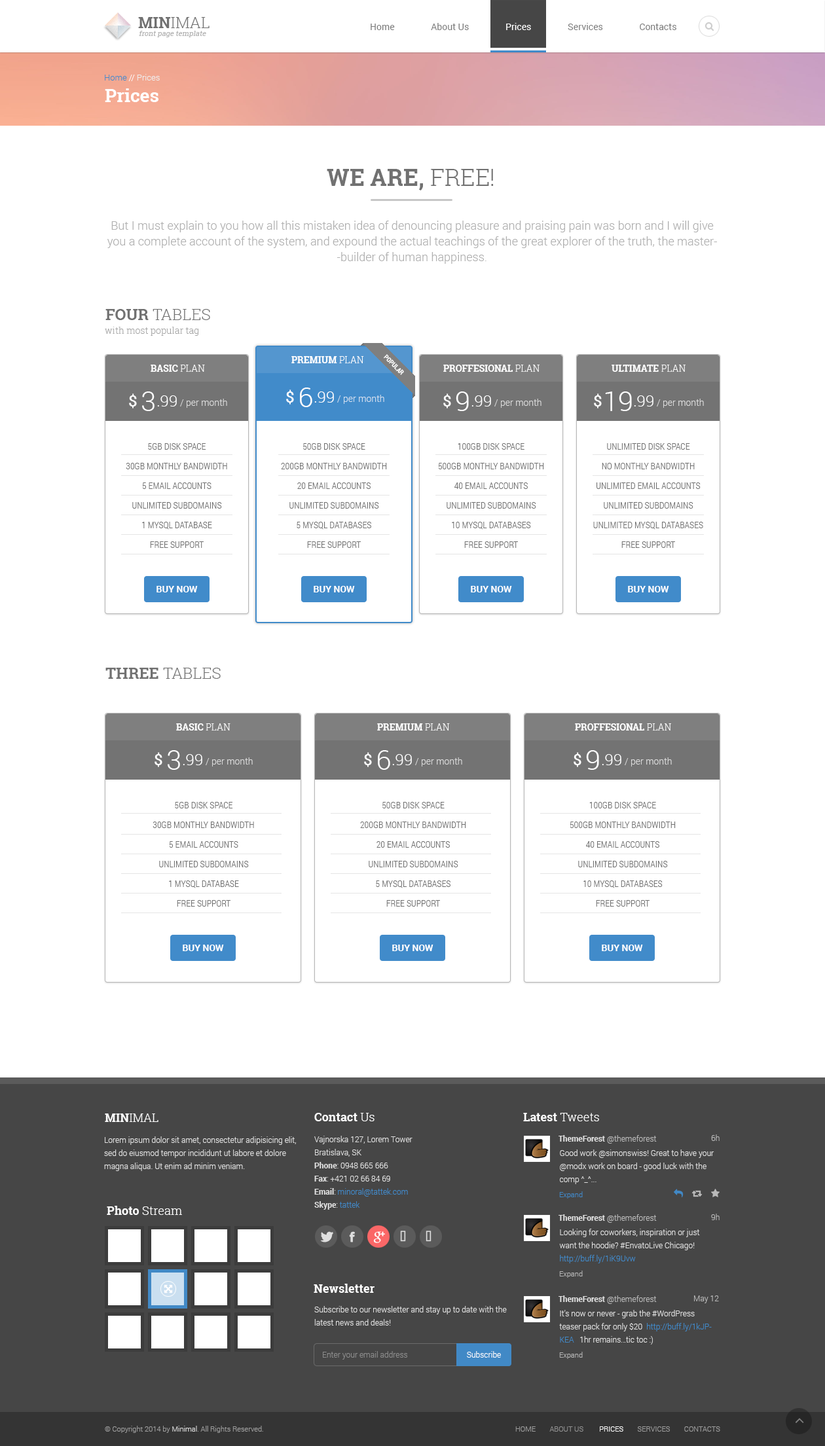
<style>
.page{position:relative;width:825px;height:1446px;background:#ffffff}
.page>*{position:absolute;margin:0}
.t1{font:15.7px "RobotoSlab-Light";color:#717171;text-transform:uppercase}
.t2{font:15.7px "RobotoSlab-Bold";color:#717171;text-transform:uppercase}
.t3{font:7.2px "RobotoSlab-Regular";color:#b1b1b1;font-style:italic}
.t4{font:8.5px "Roboto-Light";color:#eeeeee}
.t5{font:8.5px "Roboto-Light";color:#418bca}
.t6{font:8.5px "Roboto-Light";color:#ffffff}
.t7{font:18.3px "RobotoSlab-Bold";color:#ffffff}
.t8{font:23.6px "RobotoSlab-Bold";color:#717171}
.t9{font:23.6px "RobotoSlab-Light";color:#717171}
.t10{font:11.8px/15.7px "Roboto-Light";color:#b0b0b0}
.t11{font:15.7px "RobotoSlab-Light";color:#717171}
.t12{font:15.7px "RobotoSlab-Bold";color:#717171}
.t13{font:9.2px "RobotoSlab-Light";color:#a3a3a3}
.t14{font:9.2px "RobotoSlab-Bold";color:#ffffff}
.t15{font:9.2px "RobotoSlab-Light";color:#ffffff}
.t16{font:6.5px "RobotoCondensed-Bold";color:#ffffff}
.t17{font:15.7px "Roboto-Medium";color:#ffffff}
.t18{font:27.5px "Roboto-Light";color:#ffffff}
.t19{font:15.7px "Roboto-Light";color:#ffffff}
.t20{font:9.2px "Roboto-Light";color:#dbdbdb}
.t21{font:9.2px "Roboto-Light";color:#d2e0f0}
.t22{font:9.2px/19.6px "RobotoCondensed-Light";color:#717171}
.t23{font:9.2px "Roboto-Bold";color:#ffffff}
.t24{font:11.8px "RobotoSlab-Light";color:#ffffff}
.t25{font:11.8px "RobotoSlab-Bold";color:#ffffff}
.t26{font:7.9px/13.1px "Roboto-Light";color:#dfdfdf}
.t27{font:7.9px/13.1px "Roboto-Bold";color:#dfdfdf}
.t28{font:7.9px/13.1px "Roboto-Light";color:#4189c6}
.t29{font:7.9px "Roboto-Light";color:#b9b9b9}
.t30{font:7.9px "Roboto-Bold";color:#dfdfdf}
.t31{font:7.2px "Roboto-Light";color:#4189c6}
.t32{font:7.2px "Roboto-Light";color:#b6b6b6}
.t33{font:7.9px "Roboto-Light";color:#8c8c8c}
.t34{font:7.9px "Roboto-Light";color:#ffffff}
.t35{font:7.2px "Roboto-Light";color:#9d9d9d}
.t36{font:7.2px "Roboto-Light";color:#d9d9d9}
.t37{font:7.2px "Roboto-Light";color:#929292}
.t38{font:7.2px "Roboto-Light";color:#ffffff}
</style>
<div class="page">
<p class="t1" style="left:138px;top:17px;width:71px;height:11px"><span class="t2">MIN</span>IMAL</p>
<p class="t3" style="left:139px;top:31px;width:67px;height:6px">front page template</p>
<p class="t4" style="left:105px;top:74px;width:55px;height:7px"><span class="t5">Home </span><span class="t6">// </span>Prices</p>
<p class="t7" style="left:105px;top:88px;width:53px;height:14px">Prices</p>
<p class="t8" style="left:327px;top:169px;width:167px;height:21px">WE ARE, <span class="t9">FREE!</span></p>
<p class="t10" style="left:107px;top:221px;width:610px;height:43px;text-align:center">But I must explain to you how all this mistaken idea of denouncing pleasure and praising pain was born and I will give you a complete account of the system, and expound the actual teachings of the great explorer of the truth, the master-builder of human happiness.</p>
<p class="t11" style="left:105px;top:309px;width:105px;height:11px"><span class="t12">FOUR </span>TABLES</p>
<p class="t13" style="left:105px;top:327px;width:93px;height:9px">with most popular tag</p>
<p class="t14" style="left:151px;top:365px;width:54px;height:7px">BASIC<span class="t15"> PLAN</span></p>
<p class="t14" style="left:291px;top:356px;width:73px;height:7px">PREMIUM <span class="t15">PLAN</span></p>
<p class="t16" style="left:384px;top:354px;width:20px;height:21px;rotate:45deg">POPULAR</p>
<p class="t14" style="left:443px;top:365px;width:96px;height:7px">PROFFESIONAL <span class="t15">PLAN</span></p>
<p class="t14" style="left:611px;top:365px;width:74px;height:7px">ULTIMATE <span class="t15">PLAN</span></p>
<p class="t17" style="left:286px;top:389px;width:8px;height:16px">$</p>
<p class="t18" style="left:300px;top:387px;width:12px;height:20px">6</p>
<p class="t17" style="left:129px;top:393px;width:8px;height:15px">$</p>
<p class="t18" style="left:142px;top:391px;width:12px;height:20px">3</p>
<p class="t19" style="left:157px;top:395px;width:20px;height:11px">.99</p>
<p class="t20" style="left:180px;top:399px;width:47px;height:9px">/ per month</p>
<p class="t19" style="left:314px;top:391px;width:20px;height:12px">.99</p>
<p class="t21" style="left:337px;top:395px;width:47px;height:9px">/ per month</p>
<p class="t17" style="left:443px;top:393px;width:8px;height:15px">$</p>
<p class="t18" style="left:456px;top:391px;width:13px;height:20px">9</p>
<p class="t19" style="left:471px;top:395px;width:20px;height:11px">.99</p>
<p class="t20" style="left:494px;top:399px;width:47px;height:9px">/ per month</p>
<p class="t17" style="left:594px;top:393px;width:8px;height:15px">$</p>
<p class="t18" style="left:605px;top:391px;width:27px;height:20px">19</p>
<p class="t19" style="left:634px;top:395px;width:19px;height:11px">.99</p>
<p class="t20" style="left:656px;top:399px;width:48px;height:9px">/ per month</p>
<p class="t22" style="left:126px;top:443px;width:101px;height:105px;text-align:center">5GB DISK SPACE<br>30GB MONTHLY BANDWIDTH<br>5 EMAIL ACCOUNTS<br>UNLIMITED SUBDOMAINS<br>1 MYSQL DATABASE<br>FREE SUPPORT</p>
<p class="t22" style="left:281px;top:443px;width:106px;height:105px;text-align:center">50GB DISK SPACE<br>200GB MONTHLY BANDWIDTH<br>20 EMAIL ACCOUNTS<br>UNLIMITED SUBDOMAINS<br>5 MYSQL DATABASES<br>FREE SUPPORT</p>
<p class="t22" style="left:438px;top:443px;width:106px;height:105px;text-align:center">100GB DISK SPACE<br>500GB MONTHLY BANDWIDTH<br>40 EMAIL ACCOUNTS<br>UNLIMITED SUBDOMAINS<br>10 MYSQL DATABASES<br>FREE SUPPORT</p>
<p class="t22" style="left:593px;top:443px;width:110px;height:105px;text-align:center">UNLIMITED DISK SPACE<br>NO MONTHLY BANDWIDTH<br>UNLIMITED EMAIL ACCOUNTS<br>UNLIMITED SUBDOMAINS<br>UNLIMITED MYSQL DATABASES<br>FREE SUPPORT</p>
<p class="t23" style="left:156px;top:586px;width:42px;height:6px">BUY NOW</p>
<p class="t23" style="left:314px;top:586px;width:41px;height:6px">BUY NOW</p>
<p class="t23" style="left:471px;top:586px;width:41px;height:6px">BUY NOW</p>
<p class="t23" style="left:628px;top:586px;width:41px;height:6px">BUY NOW</p>
<p class="t11" style="left:105px;top:668px;width:116px;height:11px"><span class="t12">THREE </span>TABLES</p>
<p class="t14" style="left:176px;top:723px;width:54px;height:7px">BASIC<span class="t15"> PLAN</span></p>
<p class="t14" style="left:377px;top:723px;width:73px;height:7px">PREMIUM <span class="t15">PLAN</span></p>
<p class="t14" style="left:575px;top:723px;width:96px;height:7px">PROFFESIONAL <span class="t15">PLAN</span></p>
<p class="t17" style="left:154px;top:752px;width:8px;height:15px">$</p>
<p class="t18" style="left:168px;top:750px;width:12px;height:20px">3</p>
<p class="t19" style="left:183px;top:754px;width:19px;height:11px">.99</p>
<p class="t20" style="left:206px;top:757px;width:47px;height:9px">/ per month</p>
<p class="t17" style="left:364px;top:752px;width:8px;height:15px">$</p>
<p class="t18" style="left:378px;top:750px;width:12px;height:20px">6</p>
<p class="t19" style="left:392px;top:754px;width:20px;height:11px">.99</p>
<p class="t20" style="left:415px;top:757px;width:47px;height:9px">/ per month</p>
<p class="t17" style="left:573px;top:752px;width:8px;height:15px">$</p>
<p class="t18" style="left:586px;top:750px;width:13px;height:20px">9</p>
<p class="t19" style="left:602px;top:754px;width:19px;height:11px">.99</p>
<p class="t20" style="left:624px;top:757px;width:48px;height:9px">/ per month</p>
<p class="t22" style="left:153px;top:802px;width:101px;height:105px;text-align:center">5GB DISK SPACE<br>30GB MONTHLY BANDWIDTH<br>5 EMAIL ACCOUNTS<br>UNLIMITED SUBDOMAINS<br>1 MYSQL DATABASE<br>FREE SUPPORT</p>
<p class="t22" style="left:360px;top:802px;width:106px;height:105px;text-align:center">50GB DISK SPACE<br>200GB MONTHLY BANDWIDTH<br>20 EMAIL ACCOUNTS<br>UNLIMITED SUBDOMAINS<br>5 MYSQL DATABASES<br>FREE SUPPORT</p>
<p class="t22" style="left:569px;top:802px;width:106px;height:105px;text-align:center">100GB DISK SPACE<br>500GB MONTHLY BANDWIDTH<br>40 EMAIL ACCOUNTS<br>UNLIMITED SUBDOMAINS<br>10 MYSQL DATABASES<br>FREE SUPPORT</p>
<p class="t23" style="left:183px;top:944px;width:41px;height:7px">BUY NOW</p>
<p class="t23" style="left:392px;top:944px;width:41px;height:7px">BUY NOW</p>
<p class="t23" style="left:602px;top:944px;width:41px;height:7px">BUY NOW</p>
<p class="t24" style="left:105px;top:1113px;width:53px;height:9px"><span class="t25">MIN</span>IMAL</p>
<p class="t25" style="left:314px;top:1113px;width:60px;height:8px">Contact <span class="t24">Us</span></p>
<p class="t25" style="left:523px;top:1113px;width:76px;height:8px">Latest <span class="t24">Tweets</span></p>
<p class="t26" style="left:104px;top:1136px;width:192px;height:35px">Lorem ipsum dolor sit amet, consectetur adipisicing elit, sed do eiusmod tempor incididunt ut labore et dolore magna aliqua. Ut enim ad minim veniam.</p>
<p class="t26" style="left:314px;top:1136px;width:98px;height:74px">Vajnorska 127, Lorem Tower<br>Bratislava, SK<br><span class="t27">Phone</span>: 0948 665 666<br><span class="t27">Fax</span>: +421 02 66 84 69<br><span class="t27">Email</span>: <span class="t28">minoral@tattek.com<br></span><span class="t27">Skype</span>: <span class="t28">tattek</span></p>
<p class="t29" style="left:558px;top:1135px;width:98px;height:8px"><span class="t30">ThemeForest </span>@themeforest</p>
<p class="t29" style="left:711px;top:1134px;width:8px;height:7px">6h</p>
<p class="t26" style="left:559px;top:1149px;width:155px;height:35px">Good work @simonswiss! Great to have your @modx work on board - good luck with the comp ^_^...<br>^Dan</p>
<p class="t31" style="left:559px;top:1191px;width:24px;height:7px">Expand</p>
<p class="t24" style="left:107px;top:1206px;width:75px;height:9px"><span class="t25">Photo </span>Stream</p>
<p class="t29" style="left:558px;top:1214px;width:98px;height:9px"><span class="t30">ThemeForest </span>@themeforest</p>
<p class="t29" style="left:711px;top:1214px;width:8px;height:6px">9h</p>
<p class="t26" style="left:559px;top:1229px;width:141px;height:34px">Looking for coworkers, inspiration or just want the hoodie? #EnvatoLive Chicago! <span class="t28">http://buff.ly/1iK9Uvw<br></span>^Dan</p>
<p class="t32" style="left:559px;top:1270px;width:24px;height:8px">Expand</p>
<p class="t25" style="left:314px;top:1284px;width:60px;height:9px">Newsletter</p>
<p class="t29" style="left:558px;top:1295px;width:98px;height:9px"><span class="t30">ThemeForest </span>@themeforest</p>
<p class="t29" style="left:694px;top:1295px;width:25px;height:8px">May 12</p>
<p class="t26" style="left:314px;top:1306px;width:193px;height:19px">Subscribe to our newsletter and stay up to date with the latest news and deals!</p>
<p class="t26" style="left:559px;top:1310px;width:152px;height:34px">It's now or never - grab the #WordPress teaser pack for only $20  <span class="t28">http://buff.ly/1kJPKEA</span>   1hr remains…tic toc :)<br>^Dan</p>
<p class="t33" style="left:323px;top:1351px;width:84px;height:8px">Enter your email address</p>
<p class="t34" style="left:467px;top:1351px;width:34px;height:7px">Subscribe</p>
<p class="t32" style="left:559px;top:1352px;width:24px;height:7px">Expand</p>
<p class="t35" style="left:105px;top:1426px;width:158px;height:7px">© Copyright 2014 by <span class="t36">Minimal</span>. All Rights Reserved.</p>
<p class="t35" style="left:515px;top:1426px;width:205px;height:5px">HOME        <span class="t37">ABOUT US         </span><span class="t38">PRICES</span>        SERVICES        CONTACTS</p>
</div>
